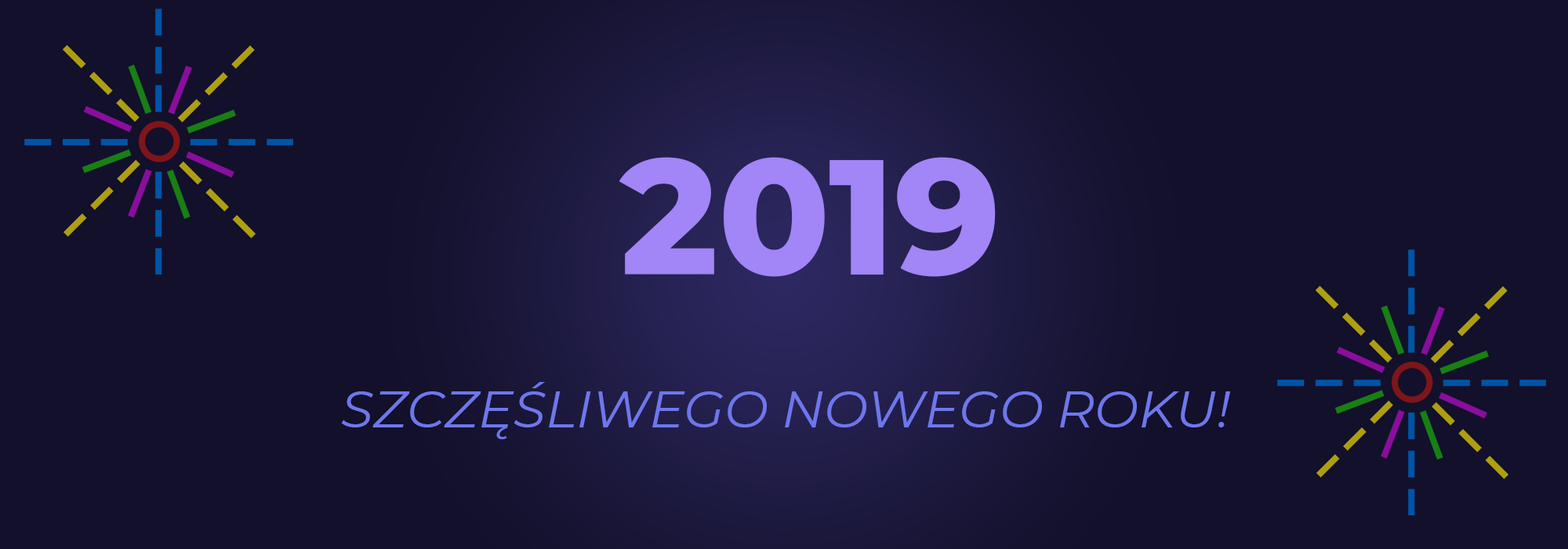
<style>
.page{position:relative;width:1568px;height:549px;background:#12102a}
.page>*{position:absolute;margin:0}
.t1{font:163.3px "Montserrat-ExtraBold";color:#a285f6}
.t2{font:52.3px "Montserrat-Italic";color:#6e77eb}
</style>
<div class="page">
<p class="t1" style="left:619px;top:157px;width:377px;height:120px">2019</p>
<p class="t2" style="left:341px;top:382px;width:889px;height:57px">SZCZĘŚLIWEGO NOWEGO ROKU!</p>
</div>
